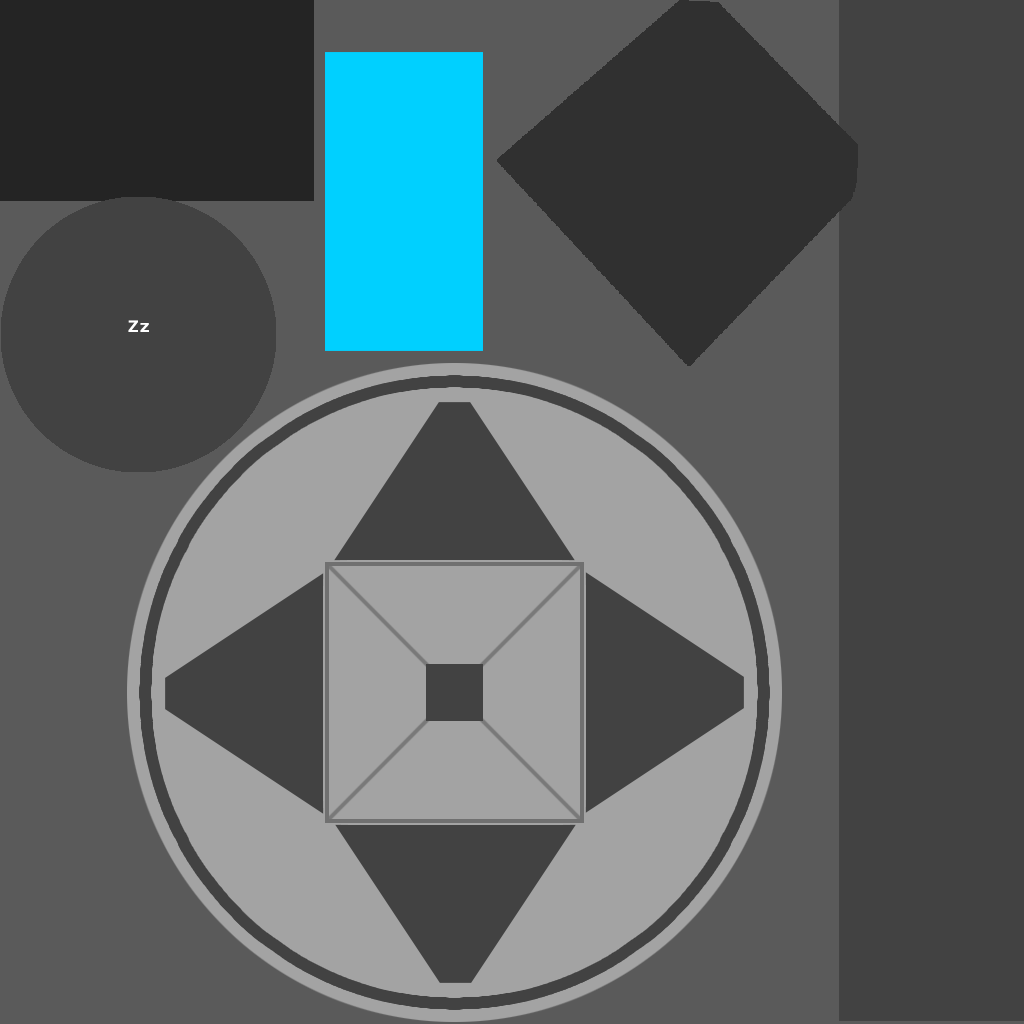
<style>
.page{position:relative;width:1024px;height:1024px;background:#424242}
.page>*{position:absolute;margin:0}
.t1{font:17.1px "Consolas";color:#ffffff;font-weight:bold;scale:1.16 1}
</style>
<div class="page">
<p class="t1" style="left:128px;top:320px;width:21px;height:12px">Zz</p>
</div>
